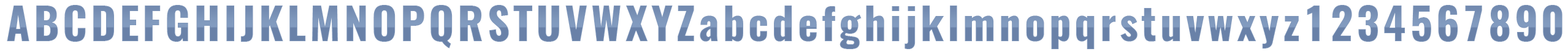
<style>
.page{position:relative;width:1568px;height:51px;background:#ffffff}
.page>*{position:absolute;margin:0}
.t1{font:43.5px "Oswald-Bold";letter-spacing:0.08em;color:#6981a8}
</style>
<div class="page">
<p class="t1" style="left:7px;top:5px;width:1555px;height:44px">ABCDEFGHIJKLMNOPQRSTUVWXYZabcdefghijklmnopqrstuvwxyz1234567890</p>
</div>
